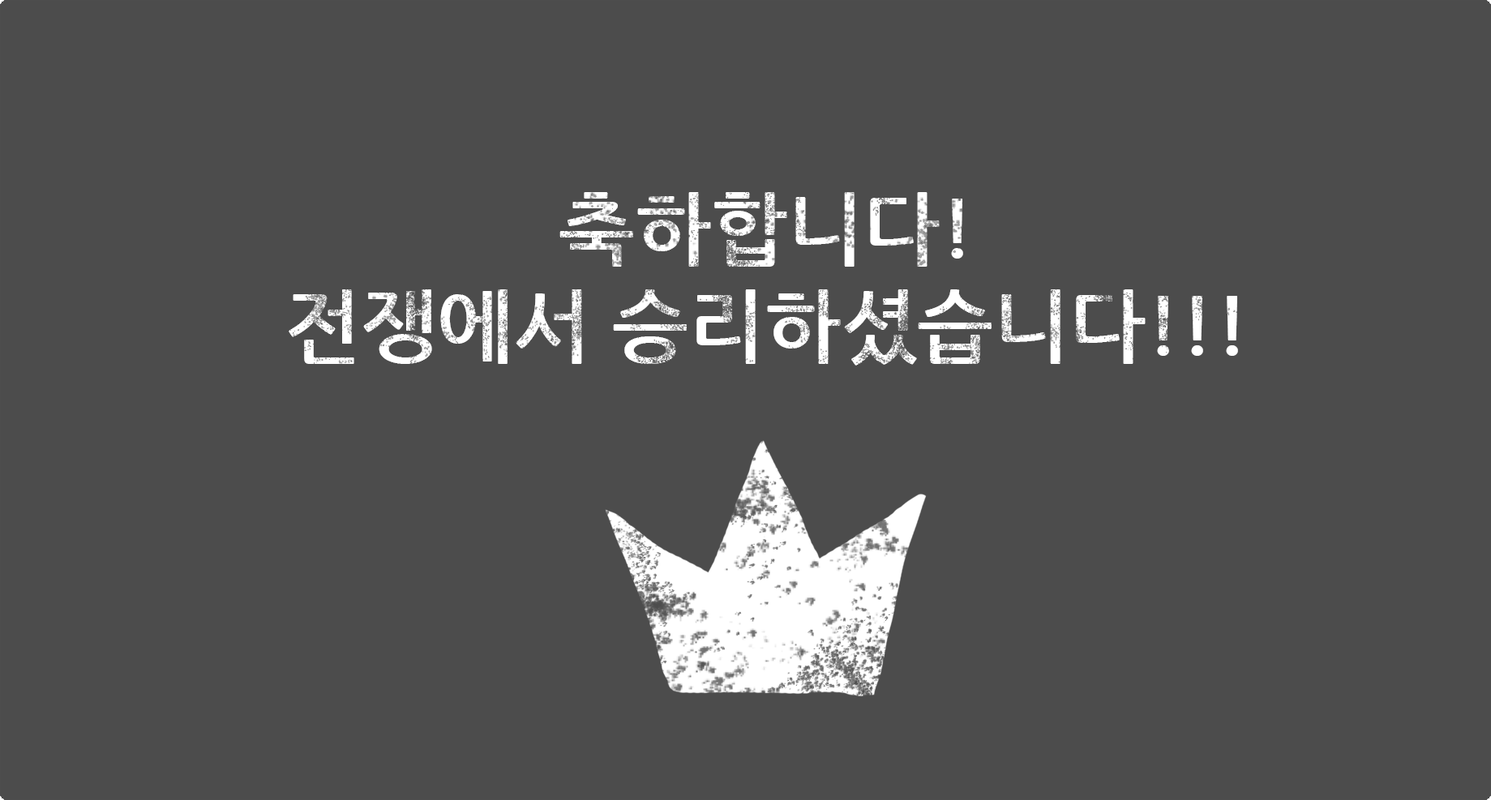
<style>
.page{position:relative;width:1491px;height:800px;background:#4c4c4c}
.page>*{position:absolute;margin:0}
.t1{font:81.1px "NanumGothicBold";color:#ffffff}
</style>
<div class="page">
<p class="t1" style="left:289px;top:192px;width:949px;height:174px;text-align:center">축하합니다!<br>전쟁에서 승리하셨습니다!!!</p>
</div>
